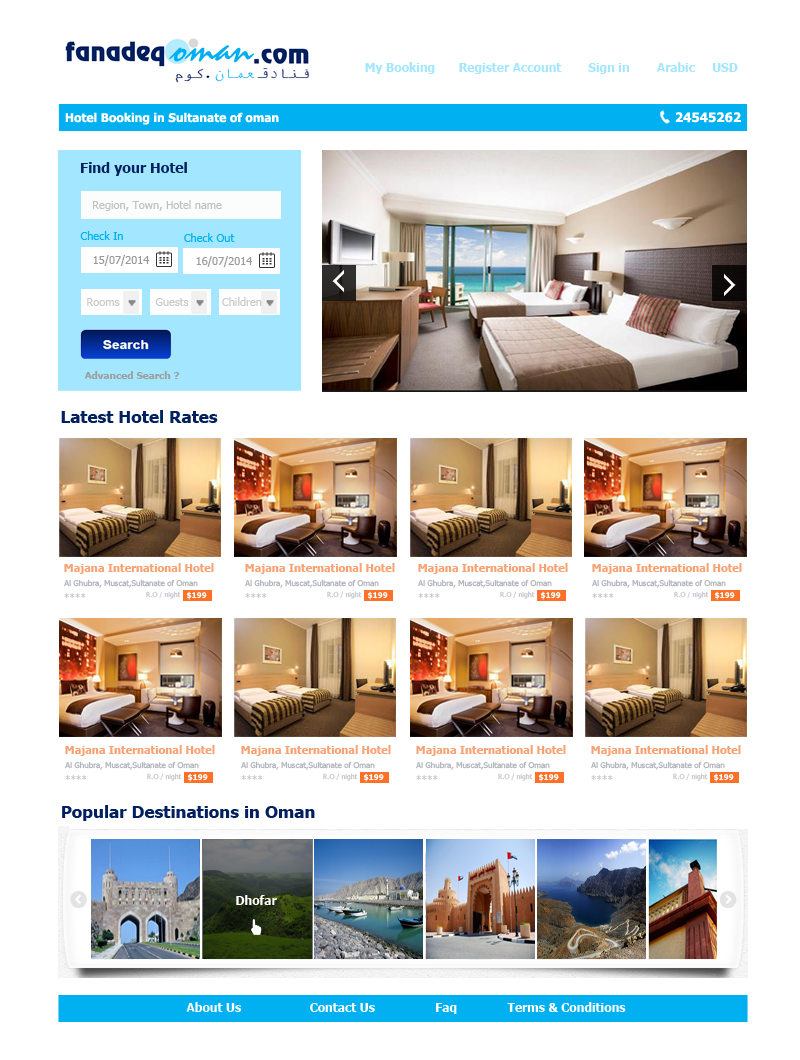
<style>
.page{position:relative;width:800px;height:1060px;background:#ffffff}
.page>*{position:absolute;margin:0}
.t1{font:12px "Tahoma-Bold";color:#a2e7ff}
.t2{font:12px "Tahoma-Bold";color:#ffffff}
.t3{font:13px "Tahoma-Bold";color:#ffffff}
.t4{font:14px "Tahoma-Bold";color:#002060}
.t5{font:11px "Tahoma";color:#bfc0c1}
.t6{font:11px "Tahoma";color:#00b0f0}
.t7{font:11px "Tahoma";color:#999999}
.t8{font:11px "Tahoma";color:#c7c8c9}
.t9{font:10px "Tahoma-Bold";color:#9e9e9e}
.t10{font:17px "Tahoma-Bold";color:#002060}
.t11{font:12px "Tahoma-Bold";color:#fefefe}
</style>
<div class="page">
<p class="t1" style="left:365px;top:62px;width:70px;height:12px">My Booking</p>
<p class="t1" style="left:459px;top:63px;width:103px;height:11px">Register Account</p>
<p class="t1" style="left:588px;top:63px;width:41px;height:11px">Sign in</p>
<p class="t1" style="left:657px;top:62px;width:38px;height:10px">Arabic</p>
<p class="t1" style="left:712px;top:63px;width:26px;height:9px">USD</p>
<p class="t2" style="left:65px;top:112px;width:214px;height:13px">Hotel Booking in Sultanate of oman</p>
<p class="t3" style="left:675px;top:112px;width:66px;height:11px">24545262</p>
<p class="t4" style="left:81px;top:162px;width:106px;height:14px">Find your Hotel</p>
<p class="t5" style="left:93px;top:200px;width:129px;height:11px">Region, Town, Hotel name</p>
<p class="t6" style="left:80px;top:231px;width:43px;height:9px">Check In</p>
<p class="t6" style="left:184px;top:233px;width:51px;height:9px">Check Out</p>
<p class="t7" style="left:93px;top:255px;width:57px;height:11px">15/07/2014</p>
<p class="t7" style="left:196px;top:256px;width:57px;height:11px">16/07/2014</p>
<p class="t8" style="left:87px;top:298px;width:33px;height:8px">Rooms</p>
<p class="t8" style="left:155px;top:298px;width:34px;height:8px">Guests</p>
<p class="t8" style="left:222px;top:297px;width:40px;height:9px">Children</p>
<p class="t9" style="left:84px;top:371px;width:96px;height:8px">Advanced Search ?</p>
<p class="t10" style="left:61px;top:410px;width:157px;height:13px">Latest Hotel Rates</p>
<p class="t10" style="left:62px;top:805px;width:253px;height:16px">Popular Destinations in Oman</p>
<p class="t11" style="left:236px;top:895px;width:41px;height:10px">Dhofar</p>
<p class="t2" style="left:186px;top:1002px;width:55px;height:10px">About Us</p>
<p class="t2" style="left:310px;top:1003px;width:65px;height:9px">Contact Us</p>
<p class="t2" style="left:436px;top:1003px;width:21px;height:11px">Faq</p>
<p class="t2" style="left:507px;top:1002px;width:119px;height:10px">Terms &amp; Conditions</p>
</div>
